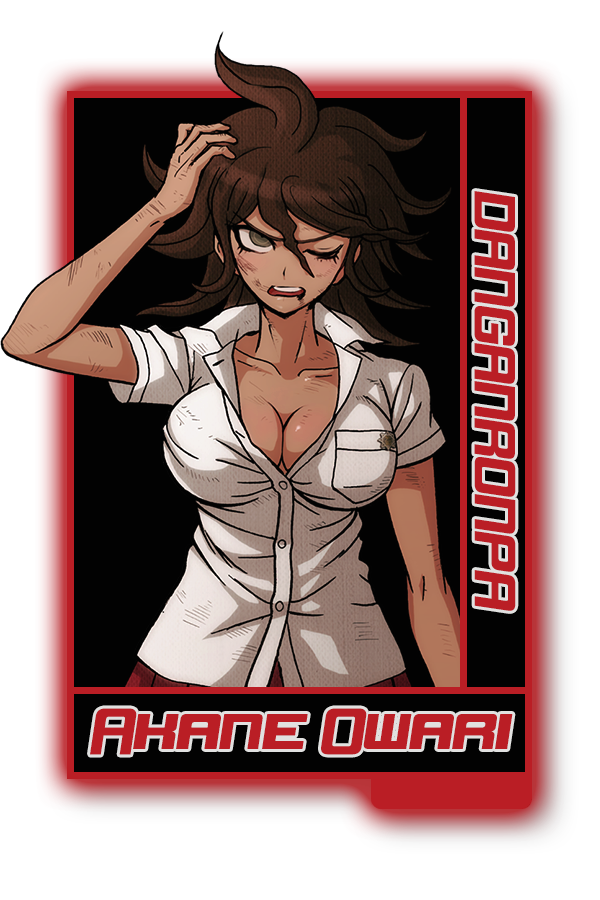
<style>
.page{position:relative;width:600px;height:900px;background:#020202}
.page>*{position:absolute;margin:0}
.t1{font:48.8px "DorBlue";color:#bb2c2e}
.t2{font:55.4px "DorBlue";color:#bb2c2e}
</style>
<div class="page">
<p class="t1" style="left:474px;top:191px;width:42px;height:420px;rotate:90deg">DANGANRONPA</p>
<p class="t2" style="left:90px;top:708px;width:423px;height:47px">Akane Owari</p>
</div>
